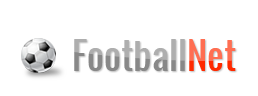
<style>
.page{position:relative;width:258px;height:96px;background:#ffffff}
.page>*{position:absolute;margin:0}
.t1{font:36px "Oswald"}
</style>
<div class="page">
<p class="t1" style="left:74px;top:39px;width:162px;height:32px">FootballNet</p>
</div>
